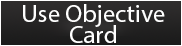
<style>
.page{position:relative;width:182px;height:46px}
.page>*{position:absolute;margin:0}
.t1{font:25px/20.8px "MyriadPro-Regular";color:#ffffff}
</style>
<div class="page">
<p class="t1" style="left:23px;top:4px;width:142px;height:39px;text-align:center">Use Objective<br>Card</p>
</div>
